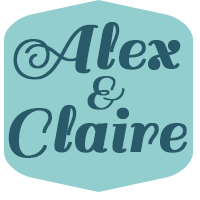
<style>
.page{position:relative;width:200px;height:200px;background:#93cecf}
.page>*{position:absolute;margin:0}
.t1{font:70.8px "Sail-Regular";color:#295a69;font-weight:bold}
.t2{font:50px "Sail-Regular";color:#295a69;font-weight:bold}
</style>
<div class="page">
<p class="t1" style="left:13px;top:22px;width:168px;height:58px">Alex</p>
<p class="t2" style="left:87px;top:76px;width:38px;height:34px">&amp;</p>
<p class="t1" style="left:8px;top:105px;width:179px;height:53px">Claire</p>
</div>
